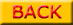
<style>
.page{position:relative;width:73px;height:25px;background:#ffc501}
.page>*{position:absolute;margin:0}
.t1{font:17.5px "Verdana";font-weight:bold}
</style>
<div class="page">
<p class="t1" style="left:12px;top:5px;width:50px;height:14px">BACK</p>
</div>
